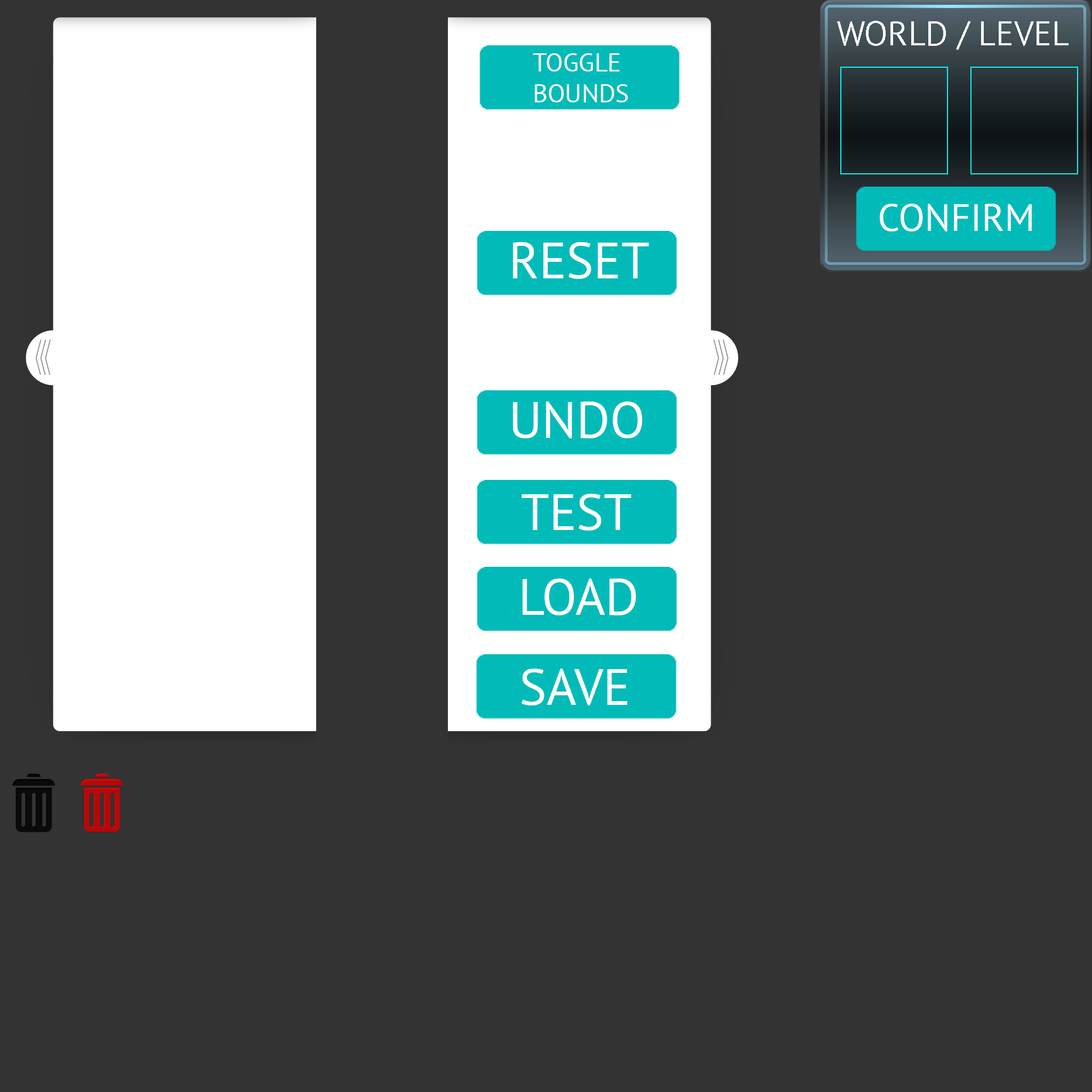
<style>
.page{position:relative;width:1092px;height:1092px;background:#333333}
.page>*{position:absolute;margin:0}
.t1{font:34.1px "PTSans-Regular";color:#ffffff}
.t2{font:25.6px "PTSans-Regular";color:#ffffff}
.t3{font:38.4px "PTSans-Regular";color:#ffffff}
.t4{font:51.2px "PTSans-Regular";color:#ffffff}
</style>
<div class="page">
<p class="t1" style="left:837px;top:21px;width:232px;height:29px">WORLD / LEVEL</p>
<p class="t2" style="left:533px;top:53px;width:95px;height:49px">TOGGLE<br>BOUNDS</p>
<p class="t3" style="left:880px;top:204px;width:152px;height:27px">CONFIRM</p>
<p class="t4" style="left:513px;top:242px;width:136px;height:37px">RESET</p>
<p class="t4" style="left:513px;top:401px;width:130px;height:37px">UNDO</p>
<p class="t4" style="left:521px;top:494px;width:110px;height:37px">TEST</p>
<p class="t4" style="left:523px;top:579px;width:113px;height:36px">LOAD</p>
<p class="t4" style="left:521px;top:669px;width:107px;height:36px">SAVE</p>
</div>
